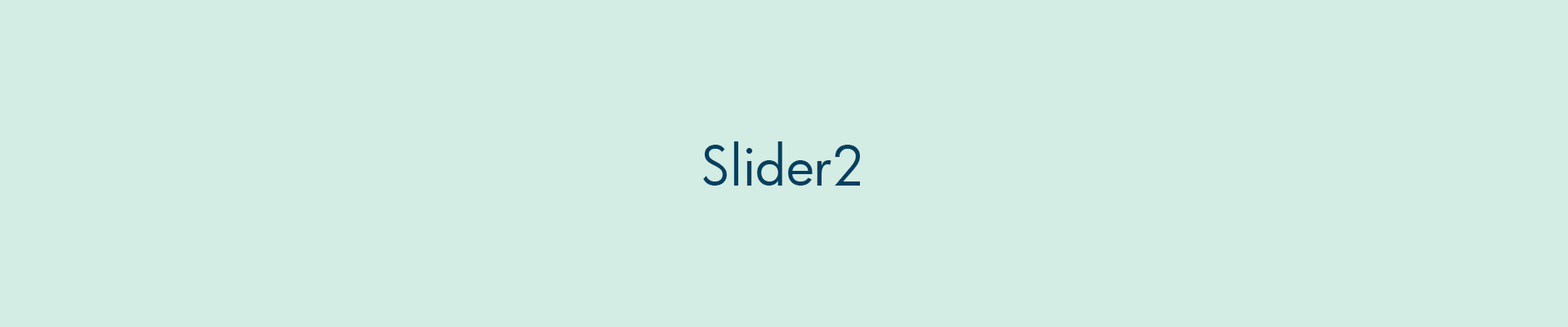
<style>
.page{position:relative;width:1568px;height:327px;background:#d3ece4}
.page>*{position:absolute;margin:0}
.t1{font:53.1px "Futura-Book";color:#014060}
</style>
<div class="page">
<p class="t1" style="left:703px;top:141px;width:157px;height:44px">Slider2</p>
</div>
